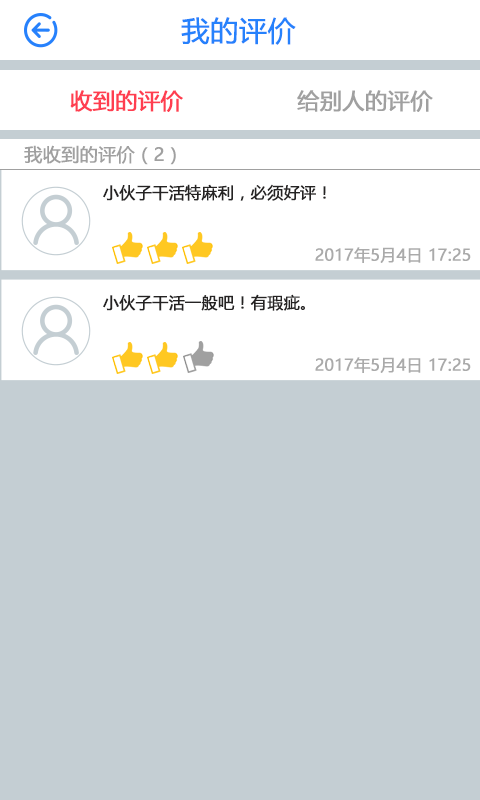
<style>
.page{position:relative;width:480px;height:800px;background:#c4ced3}
.page>*{position:absolute;margin:0}
.t1{font:28px "MicrosoftYaHei";color:#2681fc;font-weight:bold}
.t2{font:22px "MicrosoftYaHei";color:#ff3e50;font-weight:bold}
.t3{font:22px "MicrosoftYaHei";color:#a0a0a0;font-weight:bold}
.t4{font:18px "MicrosoftYaHei";color:#a0a0a0;font-weight:bold}
.t5{font:16px "MicrosoftYaHei";color:#252323;font-weight:bold}
.t6{font:16px "MicrosoftYaHei";color:#aaaaaa;font-weight:bold}
</style>
<div class="page">
<p class="t1" style="left:181px;top:17px;width:115px;height:28px">我的评价</p>
<p class="t2" style="left:70px;top:90px;width:113px;height:22px">收到的评价</p>
<p class="t3" style="left:297px;top:90px;width:136px;height:22px">给别人的评价</p>
<p class="t4" style="left:24px;top:145px;width:152px;height:20px">我收到的评价（2）</p>
<p class="t5" style="left:103px;top:184px;width:223px;height:17px">小伙子干活特麻利，必须好评！</p>
<p class="t6" style="left:315px;top:247px;width:156px;height:16px">2017年5月4日 17:25</p>
<p class="t5" style="left:103px;top:294px;width:202px;height:17px">小伙子干活一般吧！有瑕疵。</p>
<p class="t6" style="left:315px;top:357px;width:156px;height:16px">2017年5月4日 17:25</p>
</div>
